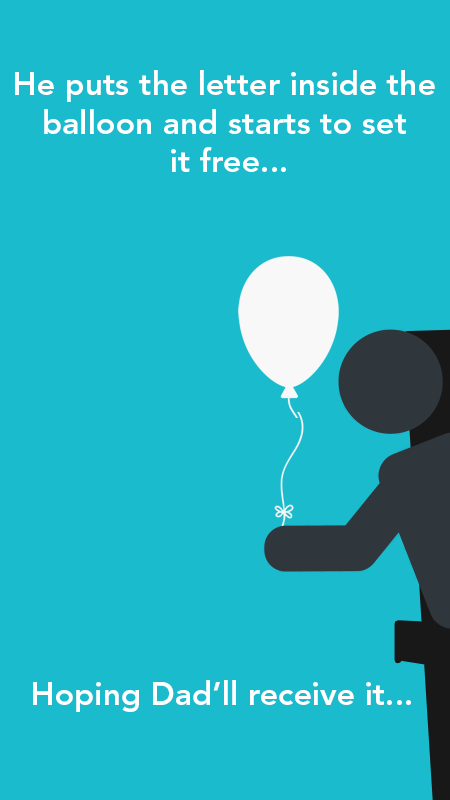
<style>
.page{position:relative;width:450px;height:800px;background:#1bbbce}
.page>*{position:absolute;margin:0}
.t1{font:32px "AvenirLTStd-Heavy";color:#ffffff}
</style>
<div class="page">
<p class="t1" style="left:15px;top:70px;width:420px;height:102px;text-align:center">He puts the letter inside the <br>balloon and starts to set <br>it free...</p>
<p class="t1" style="left:33px;top:680px;width:378px;height:32px">Hoping Dad’ll receive it...</p>
</div>
